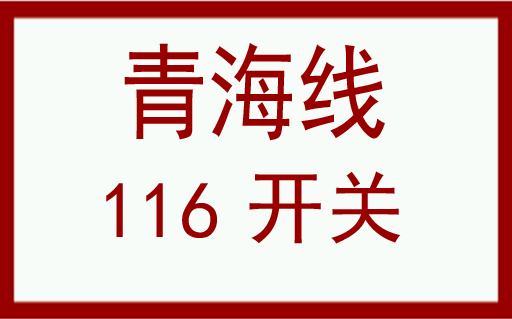
<style>
.page{position:relative;width:512px;height:319px;background:#f8fcf8}
.page>*{position:absolute;margin:0}
.t1{font:104.7px "SimHei";color:#980000;scale:0.85 1}
.t2{font:80.2px "SimHei";color:#980000}
</style>
<div class="page">
<p class="t1" style="left:124px;top:43px;width:261px;height:98px">青海线</p>
<p class="t2" style="left:249px;top:171px;width:152px;height:73px">开关</p>
<p class="t2" style="left:106px;top:183px;width:111px;height:55px">116</p>
</div>
